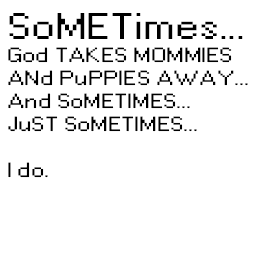
<style>
.page{position:relative;width:256px;height:256px;background:#ffffff}
.page>*{position:absolute;margin:0}
.t1{font:20px/23px "W95FARegular";color:#000000;scale:1.33 1}
.t2{font:36px/23px "W95FARegular";color:#000000;scale:1.33 1}
</style>
<div class="page">
<p class="t1" style="left:8px;top:13px;width:240px;height:165px"><span class="t2">SoMETimes...<br></span>God TAKES MOMMIES<br>ANd PuPPIES AWAY...<br>And SoMETIMES...<br>JuST SoMETIMES...<br><br>I do.</p>
</div>
